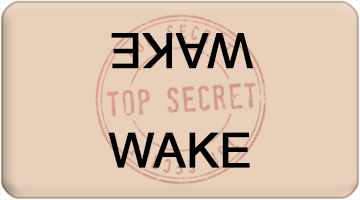
<style>
.page{position:relative;width:360px;height:200px;background:#e8d0bb}
.page>*{position:absolute;margin:0}
.t1{font:48px "ArialMT";color:#000000;font-weight:bold}
</style>
<div class="page">
<p class="t1" style="left:111px;top:33px;width:142px;height:36px;rotate:180deg">WAKE</p>
<p class="t1" style="left:108px;top:132px;width:142px;height:36px">WAKE</p>
</div>
